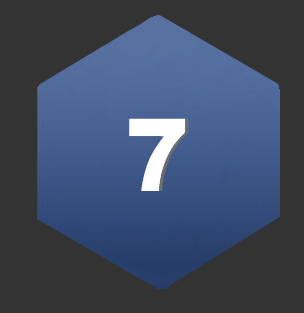
<style>
.page{position:relative;width:304px;height:313px;background:#333333}
.page>*{position:absolute;margin:0}
.t1{font:100px "Arial-Black";letter-spacing:-0.01em;color:#ffffff;font-weight:bold}
</style>
<div class="page">
<p class="t1" style="left:129px;top:118px;width:60px;height:73px">7</p>
</div>
